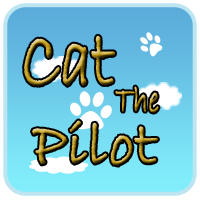
<style>
.page{position:relative;width:200px;height:200px}
.page>*{position:absolute;margin:0}
.t1{font:81.7px "BradleyHandITC";font-weight:bold;scale:0.75 1}
.t2{font:36.9px "BradleyHandITC";font-weight:bold;scale:0.77 1}
.t3{font:61.3px "BradleyHandITC";font-weight:bold}
</style>
<div class="page">
<p class="t1" style="left:24px;top:35px;width:91px;height:51px">Cat</p>
<p class="t2" style="left:115px;top:86px;width:44px;height:27px">The</p>
<p class="t3" style="left:32px;top:120px;width:126px;height:46px">Pilot</p>
</div>
